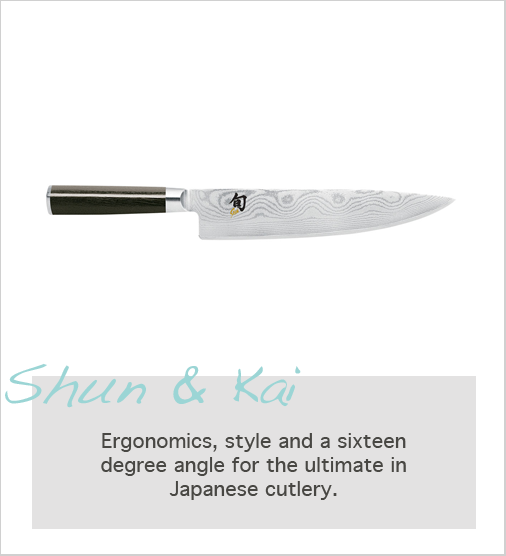
<style>
.page{position:relative;width:506px;height:556px;background:#ffffff}
.page>*{position:absolute;margin:0}
.t1{font:56px "Handwriting-Dakota";color:#9bd5d5}
.t2{font:20px "Geneva";color:#484743}
</style>
<div class="page">
<p class="t1" style="left:5px;top:363px;width:296px;height:45px">Shun &amp; Kai</p>
<p class="t2" style="left:101px;top:433px;width:305px;height:67px;text-align:center">Ergonomics, style and a sixteen degree angle for the ultimate in <br>Japanese cutlery.</p>
</div>
